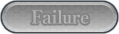
<style>
.page{position:relative;width:119px;height:34px}
.page>*{position:absolute;margin:0}
.t1{font:18px "RyuminPro-ExBold";letter-spacing:-0.04em;color:#b3b3b3}
</style>
<div class="page">
<p class="t1" style="left:31px;top:10px;width:58px;height:14px">Failure</p>
</div>
